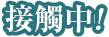
<style>
.page{position:relative;width:109px;height:37px;background:#2a747e}
.page>*{position:absolute;margin:0}
.t1{font:30px "RyuminPro-ExBold";color:#ffffff}
.t2{font:30px "RyuminPro-ExBold";color:#ffffff;font-style:italic}
</style>
<div class="page">
<p class="t1" style="left:5px;top:4px;width:99px;height:29px">接觸中<span class="t2">!</span></p>
</div>
